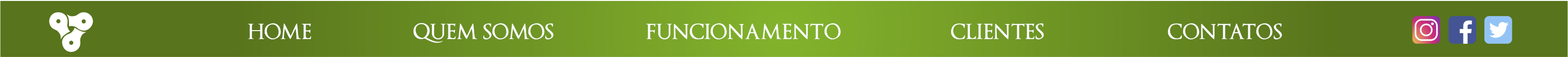
<style>
.page{position:relative;width:1568px;height:57px;background:#58741c}
.page>*{position:absolute;margin:0}
.t1{font:20.7px "OptimusPrincepsSemiBold";color:#fcfdff}
</style>
<div class="page">
<p class="t1" style="left:248px;top:23px;width:63px;height:17px">HOME</p>
<p class="t1" style="left:413px;top:23px;width:141px;height:20px">QUEM SOMOS</p>
<p class="t1" style="left:646px;top:23px;width:195px;height:17px">FUNCIONAMENTO</p>
<p class="t1" style="left:951px;top:23px;width:93px;height:17px">CLIENTES</p>
<p class="t1" style="left:1168px;top:23px;width:114px;height:17px">CONTATOS</p>
</div>
